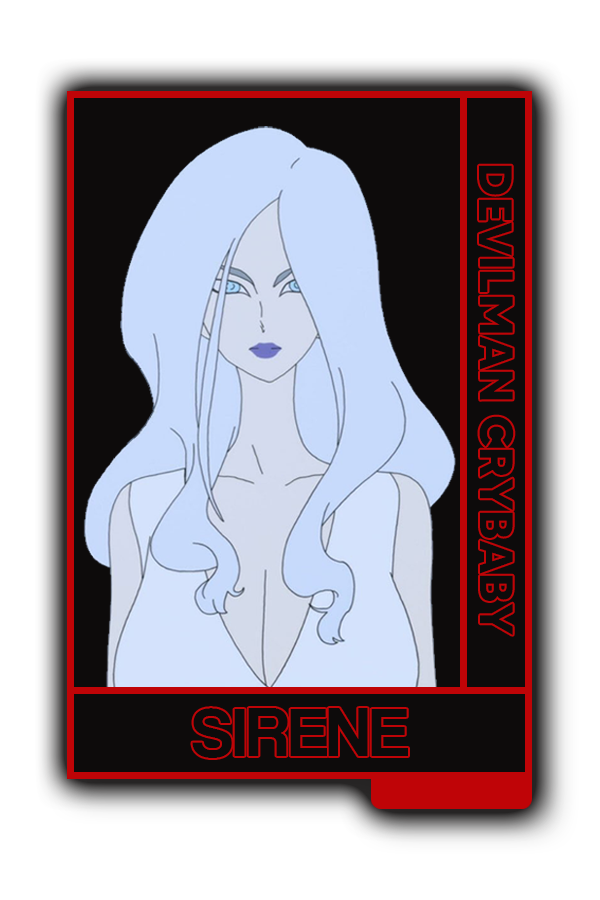
<style>
.page{position:relative;width:600px;height:900px;background:#0d0b0b}
.page>*{position:absolute;margin:0}
.t1{font:46.8px "MADETOMMY-Bold";color:#0d0b0b}
.t2{font:72.5px "CoolveticaRg-Regular";color:#0d0b0b}
</style>
<div class="page">
<p class="t1" style="left:479px;top:165px;width:35px;height:470px;rotate:90deg">DEVILMAN CRYBABY</p>
<p class="t2" style="left:192px;top:708px;width:216px;height:50px">SIRENE</p>
</div>
